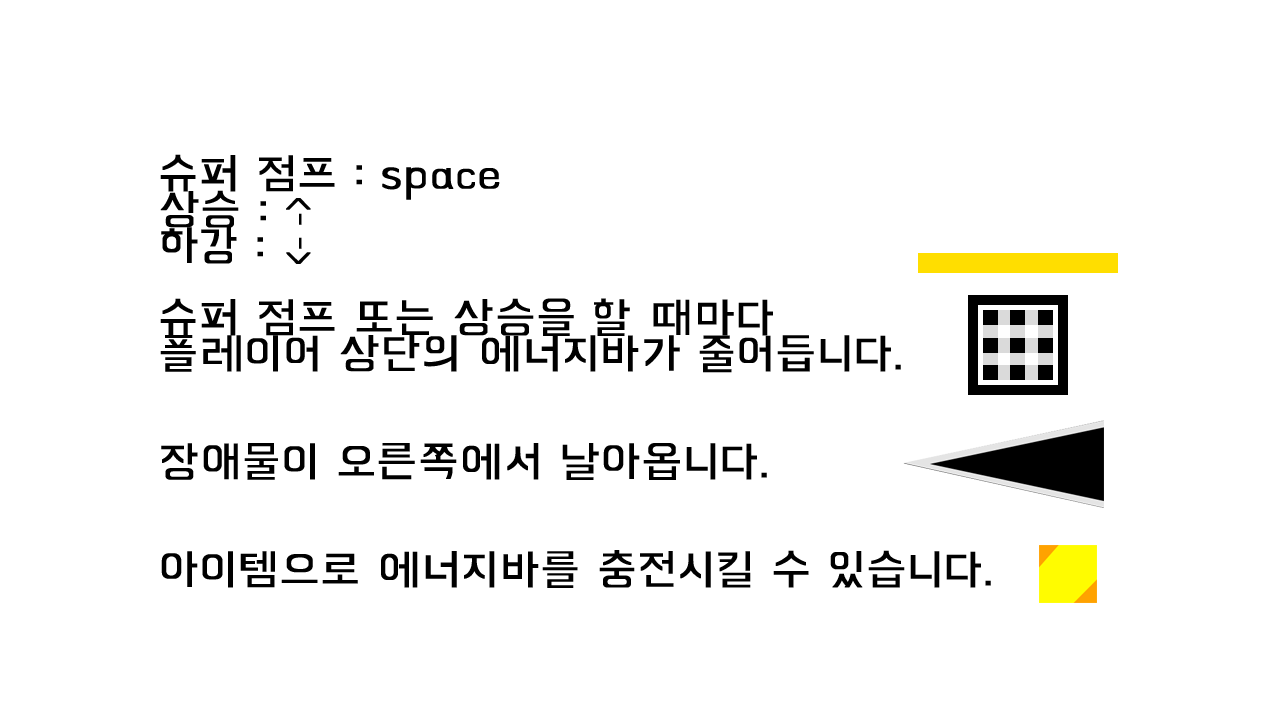
<style>
.page{position:relative;width:1280px;height:720px;background:#ffffff}
.page>*{position:absolute;margin:0}
.t1{font:45.6px/36px "BMHANNAAir";color:#000000;font-weight:bold;scale:1.05 1}
.t2{font:34.2px "BMHANNAAir";color:#000000;font-weight:bold;scale:1.05 1}
</style>
<div class="page">
<p class="t1" style="left:160px;top:154px;width:831px;height:434px">슈퍼 점프 : space<br>상승 : <br>하강 :<br><br>슈퍼 점프 또는 상승을 할 때마다<br>플레이어 상단의 에너지바가 줄어듭니다.<br><br><br>장애물이 오른쪽에서 날아옵니다.<br><br><br>아이템으로 에너지바를 충전시킬 수 있습니다.</p>
<p class="t2" style="left:286px;top:198px;width:25px;height:27px">&lt;-</p>
<p class="t2" style="left:286px;top:237px;width:25px;height:27px">-&gt;</p>
</div>
